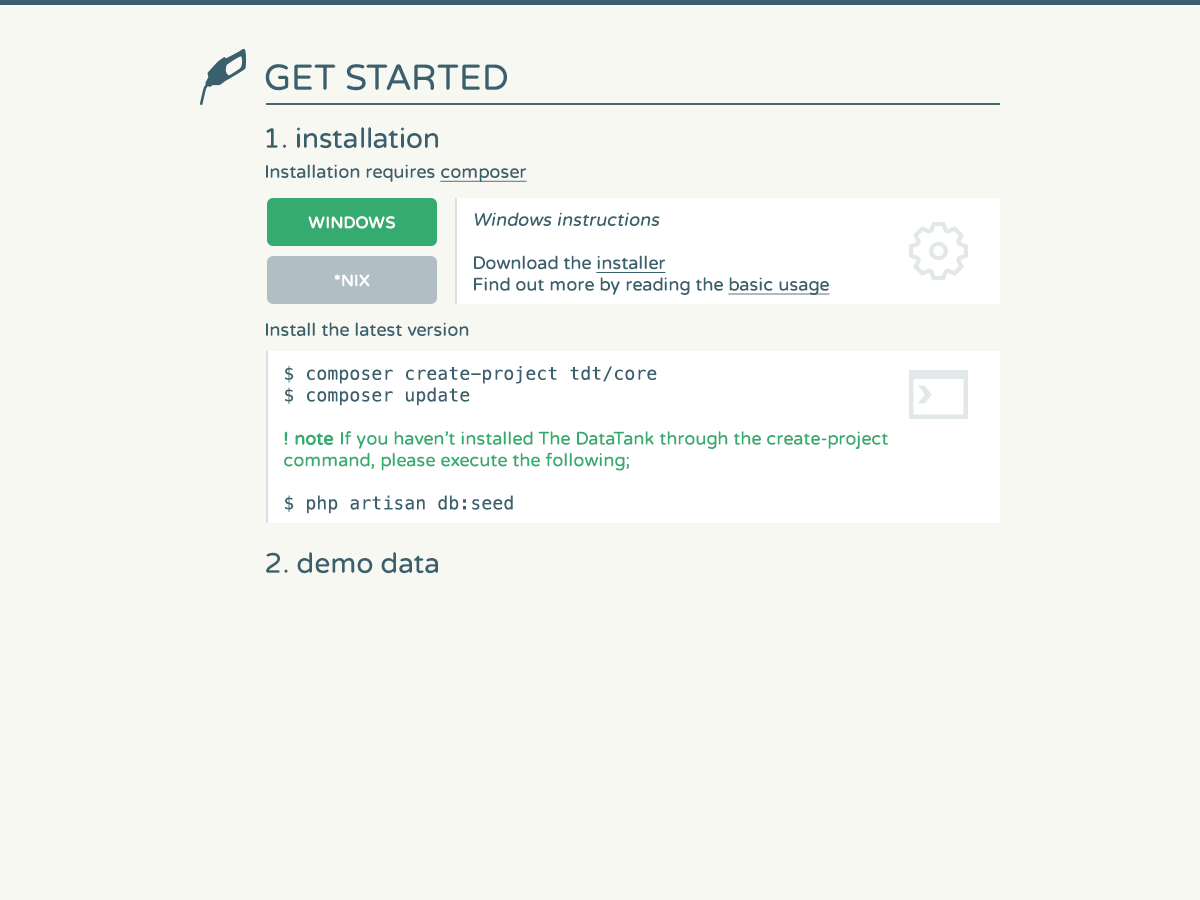
<style>
.page{position:relative;width:1200px;height:900px;background:#f8f8f3}
.page>*{position:absolute;margin:0}
.t1{font:36px "VarelaRound";color:#3b606d}
.t2{font:28px "VarelaRound";color:#3b606d}
.t3{font:18px "VarelaRound";color:#3b606d}
.t4{font:18px "VarelaRound";color:#3b606d;text-decoration:underline}
.t5{font:16px "VarelaRound";color:#ffffff;font-weight:bold}
.t6{font:18px "VarelaRound";color:#3b606d;font-style:italic}
.t7{font:18px "VarelaRound";color:#36ab70}
.t8{font:18px "Menlo-Regular";color:#3b606d}
.t9{font:18px "VarelaRound";color:#36ab70;font-weight:bold}
</style>
<div class="page">
<p class="t1" style="left:265px;top:64px;width:242px;height:27px">GET STARTED</p>
<p class="t2" style="left:266px;top:127px;width:172px;height:22px">1. installation</p>
<p class="t3" style="left:266px;top:164px;width:261px;height:18px">Installation requires <span class="t4">composer</span></p>
<p class="t5" style="left:308px;top:216px;width:87px;height:13px">WINDOWS</p>
<p class="t3" style="left:474px;top:212px;width:356px;height:83px"><span class="t6">Windows instructions<br><br></span>Download the <span class="t4">installer<br></span>Find out more by reading the <span class="t4">basic usage</span></p>
<p class="t5" style="left:334px;top:274px;width:36px;height:13px">*NIX</p>
<p class="t3" style="left:266px;top:322px;width:203px;height:14px">Install the latest version</p>
<p class="t7" style="left:284px;top:366px;width:604px;height:148px"><span class="t8">$ composer create-project tdt/core<br>$ composer update<br><br></span><span class="t9">! note </span>If you haven't installed The DataTank through the create-project <br>command, please execute the following;<br><br><span class="t8">$ php artisan db:seed</span></p>
<p class="t2" style="left:266px;top:552px;width:172px;height:22px">2. demo data</p>
</div>
